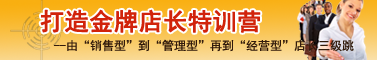
<style>
.page{position:relative;width:377px;height:60px}
.page>*{position:absolute;margin:0}
.t1{font:24px "SimHei";color:#d1230b;font-weight:bold}
.t2{font:12px "SimHei";color:#311a0b}
</style>
<div class="page">
<p class="t1" style="left:40px;top:9px;width:221px;height:24px">打造金牌店长特训营</p>
<p class="t2" style="left:54px;top:39px;width:300px;height:13px">--由“销售型”到“管理型”再到“经营型”店长三级跳</p>
</div>
